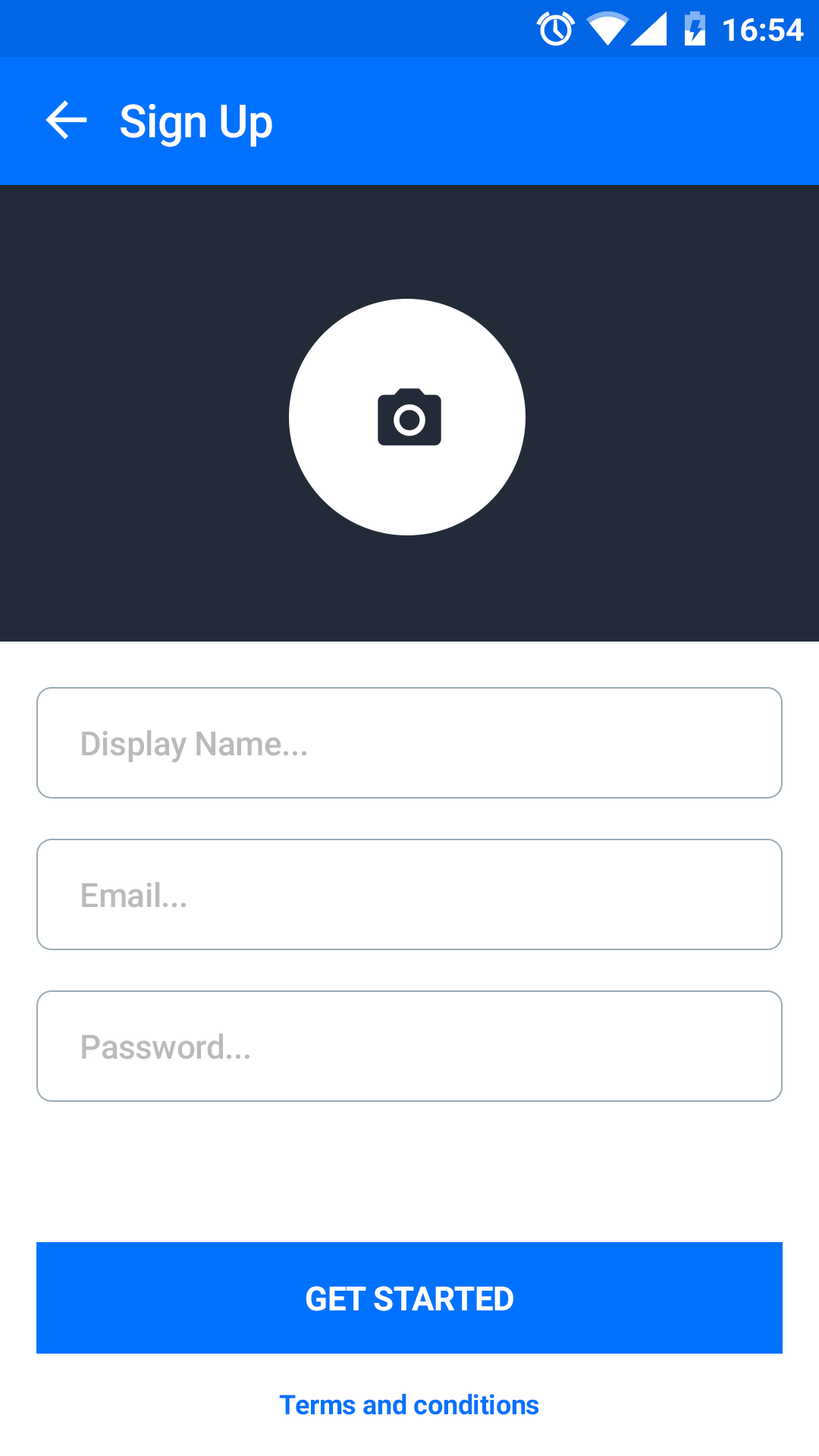
<style>
.page{position:relative;width:819px;height:1456px;background:#ffffff}
.page>*{position:absolute;margin:0}
.t1{font:45.8px "Roboto-Medium";letter-spacing:-0.01em;color:#ffffff}
.t2{font:33.4px "Roboto-Medium";letter-spacing:-0.01em;color:#bababa}
.t3{font:33.4px "Roboto-Bold";letter-spacing:-0.01em;color:#ffffff}
.t4{font:27.3px "Roboto-Bold";letter-spacing:-0.01em;color:#0172ff}
</style>
<div class="page">
<p class="t1" style="left:121px;top:104px;width:151px;height:43px">Sign Up</p>
<p class="t2" style="left:82px;top:730px;width:224px;height:33px">Display Name...</p>
<p class="t2" style="left:82px;top:882px;width:104px;height:26px">Email...</p>
<p class="t2" style="left:82px;top:1034px;width:167px;height:25px">Password...</p>
<p class="t3" style="left:306px;top:1286px;width:207px;height:25px">GET STARTED</p>
<p class="t4" style="left:279px;top:1394px;width:260px;height:21px">Terms and conditions</p>
</div>
